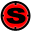
<style>
.page{position:relative;width:32px;height:32px;background:#ffffff}
.page>*{position:absolute;margin:0}
.t1{font:21.7px "Arial-Black";letter-spacing:-0.25em;color:#000000;scale:1.34 1}
</style>
<div class="page">
<p class="t1" style="left:6px;top:7px;width:20px;height:17px">S</p>
</div>
